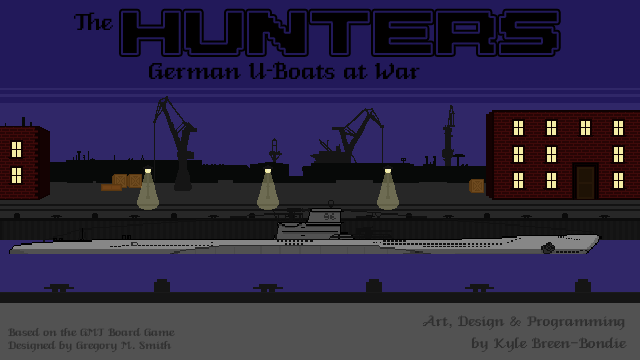
<style>
.page{position:relative;width:640px;height:360px;background:#302768}
.page>*{position:absolute;margin:0}
.t1{font:30.2px "VeniceClassic";color:#010000}
.t2{font:42.3px "M42_FLIGHT-721";color:#010000}
.t3{font:30.2px "VeniceClassic";color:#010000;scale:0.5 1}
.t4{font:18.3px "VeniceClassic";color:#303030}
.t5{font:14px/13px "VeniceClassic";color:#303030}
</style>
<div class="page">
<p class="t1" style="left:74px;top:12px;width:39px;height:18px">The</p>
<p class="t2" style="left:122px;top:11px;width:436px;height:43px">Hunters</p>
<p class="t2" style="left:122px;top:11px;width:436px;height:43px">Hunters</p>
<p class="t1" style="left:149px;top:61px;width:271px;height:18px">German U<span class="t3">-</span>Boats at War</p>
<p class="t4" style="left:422px;top:315px;width:205px;height:37px;text-align:right">Art, Design &amp; Programming<br>by Kyle Breen-Bondie</p>
<p class="t5" style="left:8px;top:327px;width:167px;height:26px">Based on the GMT Board Game<br>Designed by Gregory M. Smith</p>
</div>
